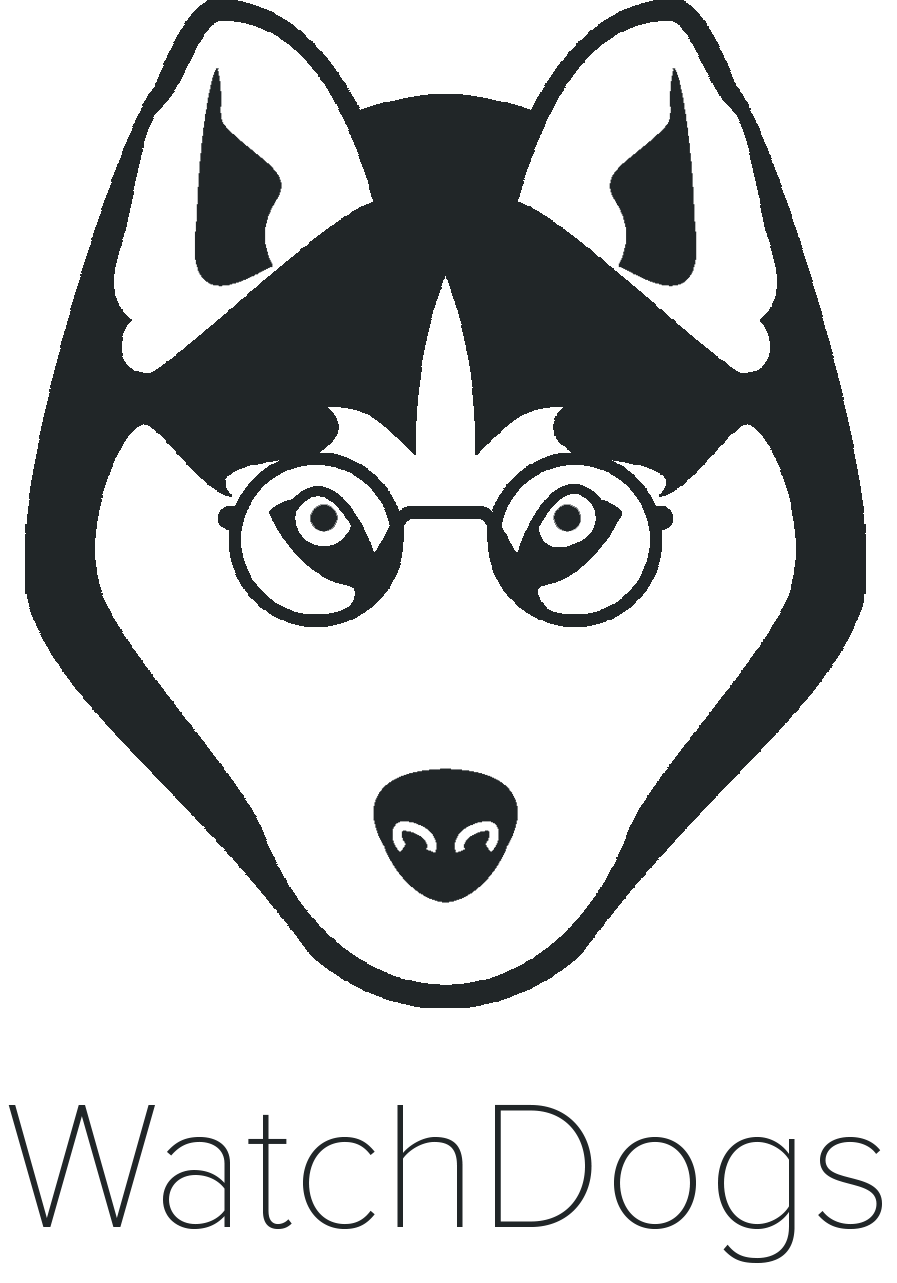
<style>
.page{position:relative;width:897px;height:1283px;background:#ffffff}
.page>*{position:absolute;margin:0}
.t1{font:182.3px "ProximaNova-Thin";color:#212628}
</style>
<div class="page">
<p class="t1" style="left:8px;top:1104px;width:874px;height:160px">WatchDogs</p>
</div>
